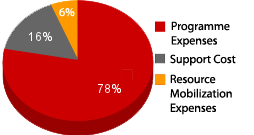
<style>
.page{position:relative;width:254px;height:135px;background:#ffffff}
.page>*{position:absolute;margin:0}
.t1{font:12px "MyriadPro-Regular";color:#ffffff}
.t2{font:12px "MyriadPro-Regular";color:#000000}
</style>
<div class="page">
<p class="t1" style="left:59px;top:8px;width:16px;height:9px">6%</p>
<p class="t2" style="left:171px;top:21px;width:59px;height:26px">Programme<br>Expenses</p>
<p class="t2" style="left:170px;top:54px;width:66px;height:12px">Support Cost</p>
<p class="t2" style="left:170px;top:74px;width:62px;height:41px">Resource<br>Mobilization<br>Expenses</p>
</div>
